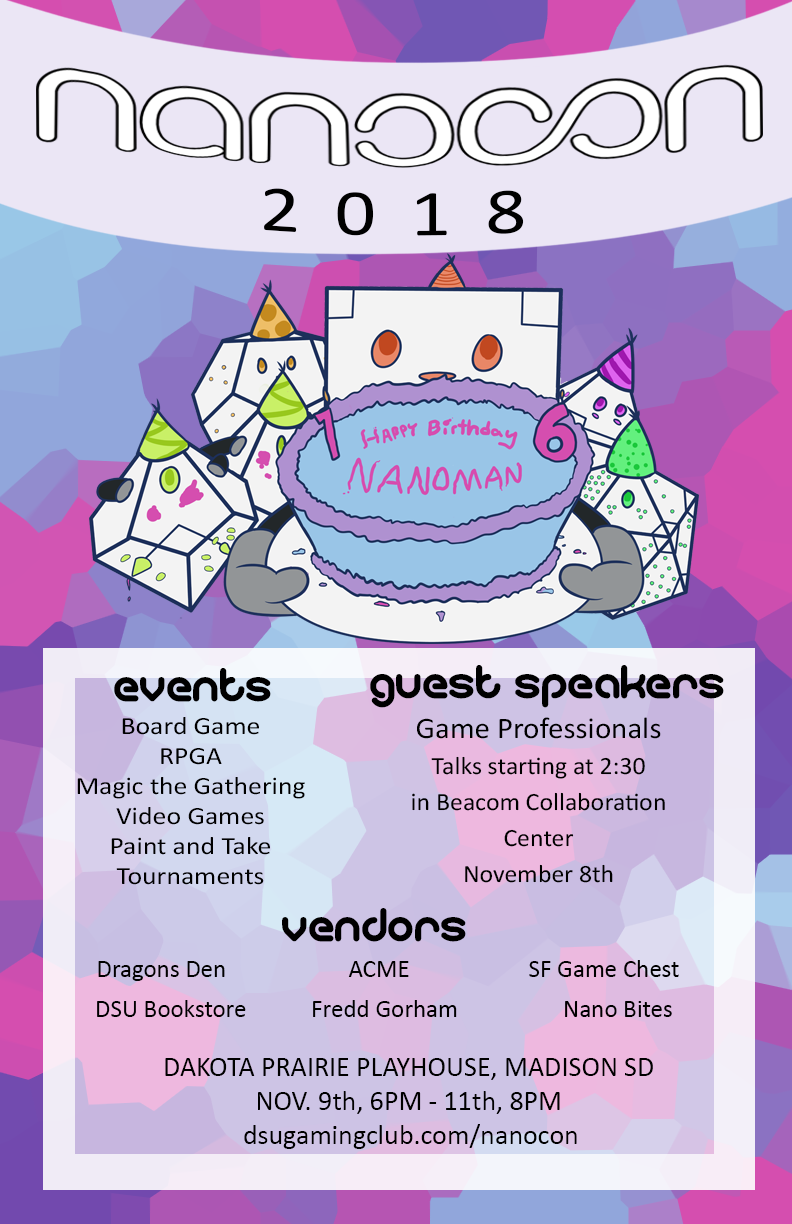
<style>
.page{position:relative;width:792px;height:1224px}
.page>*{position:absolute;margin:0}
.t1{font:66px "Calibri";letter-spacing:0.42em;color:#000000;scale:1.23 1}
.t2{font:46px "gitchgitch";color:#000000}
.t3{font:25px/30px "Calibri";color:#000000;scale:1.11 1}
.t4{font:25px/36px "Calibri";color:#000000;scale:1.03 1}
.t5{font:30px/36px "Calibri";color:#000000;scale:1.03 1}
.t6{font:25px "Calibri";color:#000000}
.t7{font:28px "Calibri";color:#000000}
</style>
<div class="page">
<p class="t1" style="left:264px;top:188px;width:260px;height:48px">2018</p>
<p class="t2" style="left:370px;top:665px;width:354px;height:43px">guest speakers</p>
<p class="t2" style="left:114px;top:668px;width:157px;height:34px">events</p>
<p class="t3" style="left:77px;top:717px;width:228px;height:168px;text-align:center">Board Game<br>RPGA<br>Magic the Gathering<br>Video Games<br>Paint and Take<br>Tournaments</p>
<p class="t4" style="left:412px;top:717px;width:253px;height:166px;text-align:center"><span class="t5">Game Professionals<br></span>Talks starting at 2:30<br>in Beacom Collaboration<br>Center<br>November 8th</p>
<p class="t2" style="left:282px;top:908px;width:184px;height:34px">Vendors</p>
<p class="t6" style="left:98px;top:960px;width:581px;height:21px">Dragons Den    ACME    SF Game Chest</p>
<p class="t6" style="left:97px;top:1000px;width:575px;height:17px">DSU Bookstore  Fredd Gorham   Nano Bites</p>
<p class="t7" style="left:165px;top:1058px;width:488px;height:56px;text-align:center">DAKOTA PRAIRIE PLAYHOUSE, MADISON SD<br>NOV. 9th, 6PM - 11th, 8PM</p>
<p class="t7" style="left:244px;top:1124px;width:333px;height:25px">dsugamingclub.com/nanocon</p>
</div>
